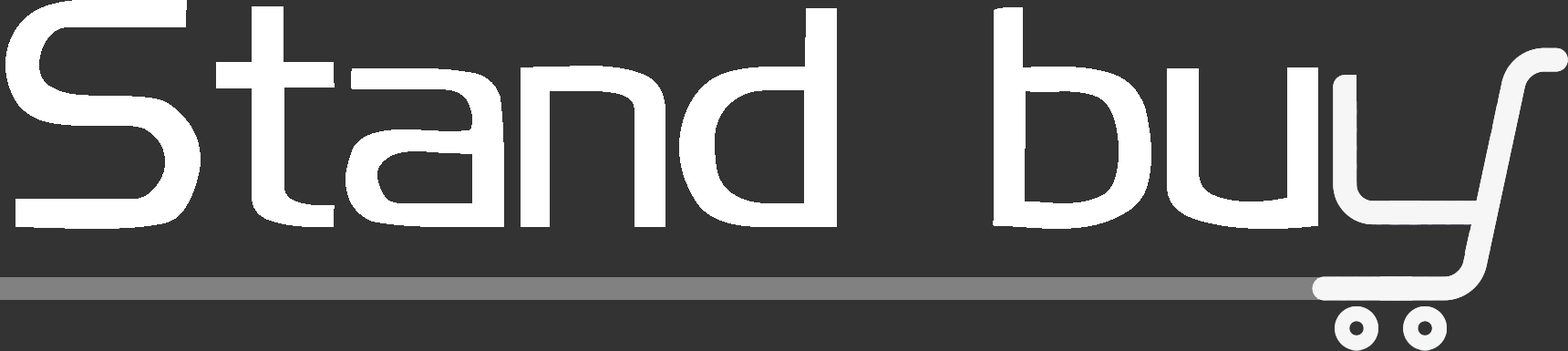
<style>
.page{position:relative;width:1568px;height:351px;background:#333333}
.page>*{position:absolute;margin:0}
.t1{font:317.2px "Koshgarian-Regular";color:#ffffff}
</style>
<div class="page">
<p class="t1" style="left:5px;top:0px;width:1313px;height:229px">Stand bu</p>
</div>
